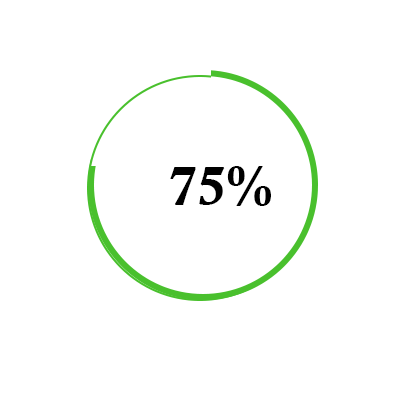
<style>
.page{position:relative;width:400px;height:400px;background:#ffffff}
.page>*{position:absolute;margin:0}
.t1{font:53.4px "CalisMTBol";color:#000000;scale:1.06 1}
</style>
<div class="page">
<p class="t1" style="left:170px;top:166px;width:101px;height:40px">75%</p>
</div>
